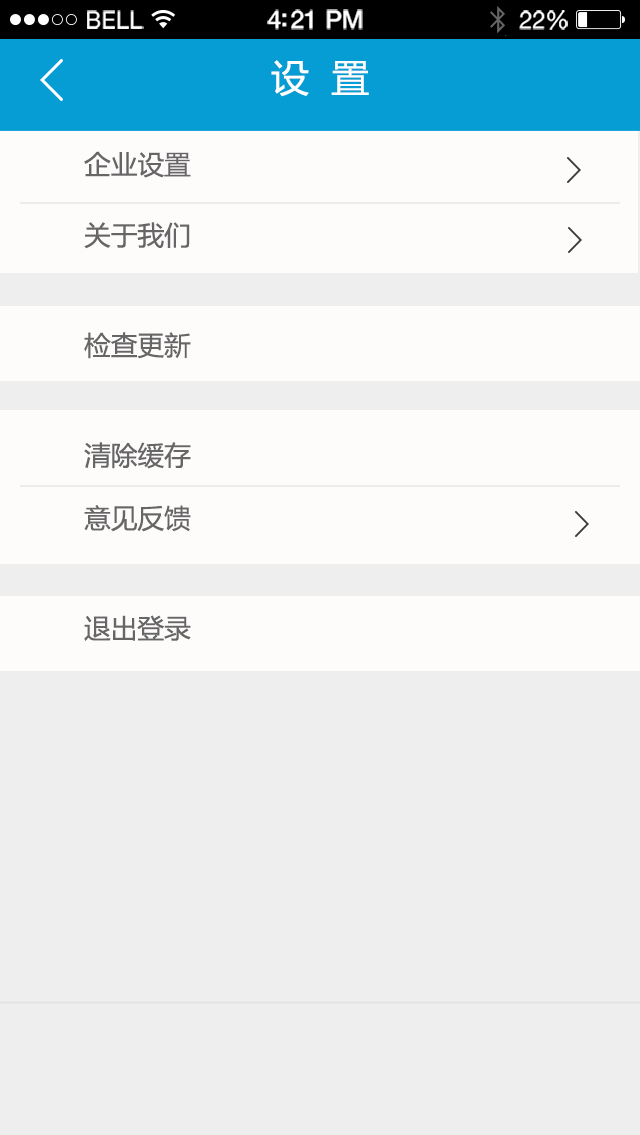
<style>
.page{position:relative;width:640px;height:1135px;background:#eeeeee}
.page>*{position:absolute;margin:0}
.t1{font:23.1px "HelveticaNeue";letter-spacing:0.02em;color:#ffffff}
.t2{font:25.1px "HelveticaNeue-Medium";letter-spacing:-0.02em;color:#ffffff}
.t3{font:24.1px "HelveticaNeue";letter-spacing:-0.02em;color:#ffffff}
.t4{font:38px "MicrosoftYaHei";color:#ffffff}
.t5{font:18px "MicrosoftYaHei";color:#8d9695}
.t6{font:26.7px/4.5px "MicrosoftYaHei";color:#666666}
</style>
<div class="page">
<p class="t1" style="left:87px;top:10px;width:57px;height:19px">BELL</p>
<p class="t2" style="left:267px;top:9px;width:96px;height:21px">4:21 PM</p>
<p class="t3" style="left:519px;top:10px;width:49px;height:20px">22%</p>
<p class="t4" style="left:271px;top:60px;width:98px;height:37px"><span class="t5">    </span>设  置</p>
<p class="t6" style="left:84px;top:151px;width:107px;height:490px">企业设置<br><br><br><br><br><br><br><br><br>关于我们<br><br><br><br><br><br><br><br><br><br><br><br><br><br>检查更新<br><br><br><br><br><br><br><br><br><br><br><br><br><br>清除缓存<br><br><br><br><br><br><br><br>意见反馈<br><br><br><br><br><br><br><br><br><br><br><br><br><br>退出登录</p>
</div>
